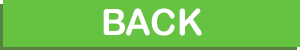
<style>
.page{position:relative;width:300px;height:50px;background:#66c241}
.page>*{position:absolute;margin:0}
.t1{font:36.3px "ArialRoundedMTBold";color:#ffffff;text-transform:uppercase}
</style>
<div class="page">
<p class="t1" style="left:103px;top:8px;width:99px;height:28px">Back</p>
</div>
